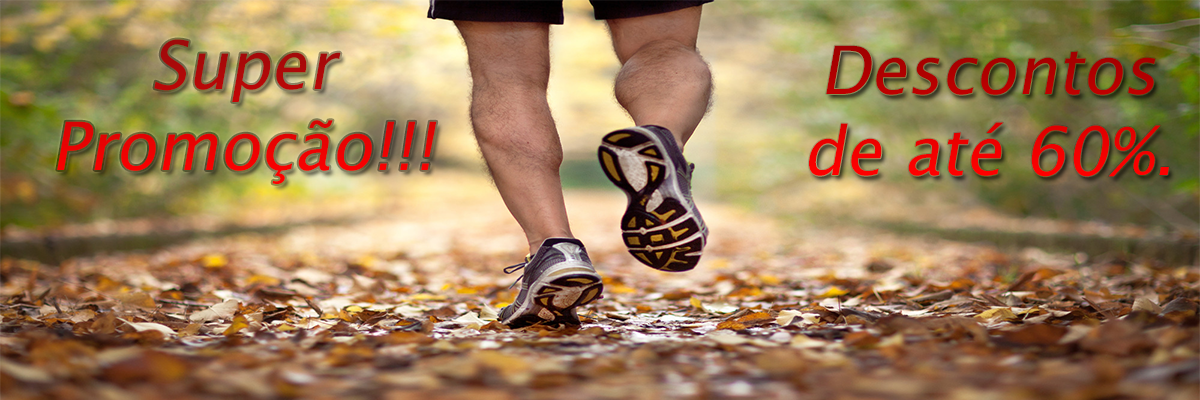
<style>
.page{position:relative;width:1200px;height:400px}
.page>*{position:absolute;margin:0}
.t1{font:66.7px "LucidaSansUnicode";color:#e30515;font-style:italic}
.t2{font:66.7px "LucidaSansUnicode";font-style:italic}
</style>
<div class="page">
<p class="t1" style="left:57px;top:39px;width:380px;height:145px;text-align:center">Super<br>Promoção!!!</p>
<p class="t2" style="left:809px;top:45px;width:360px;height:132px;text-align:center">Descontos de até 60%.</p>
</div>
